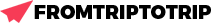
<style>
.page{position:relative;width:212px;height:23px;background:#ffffff}
.page>*{position:absolute;margin:0}
.t1{font:19.3px "Montserrat-Black";color:#000000}
</style>
<div class="page">
<p class="t1" style="left:34px;top:5px;width:177px;height:14px">FROMTRIPTOTRIP</p>
</div>
